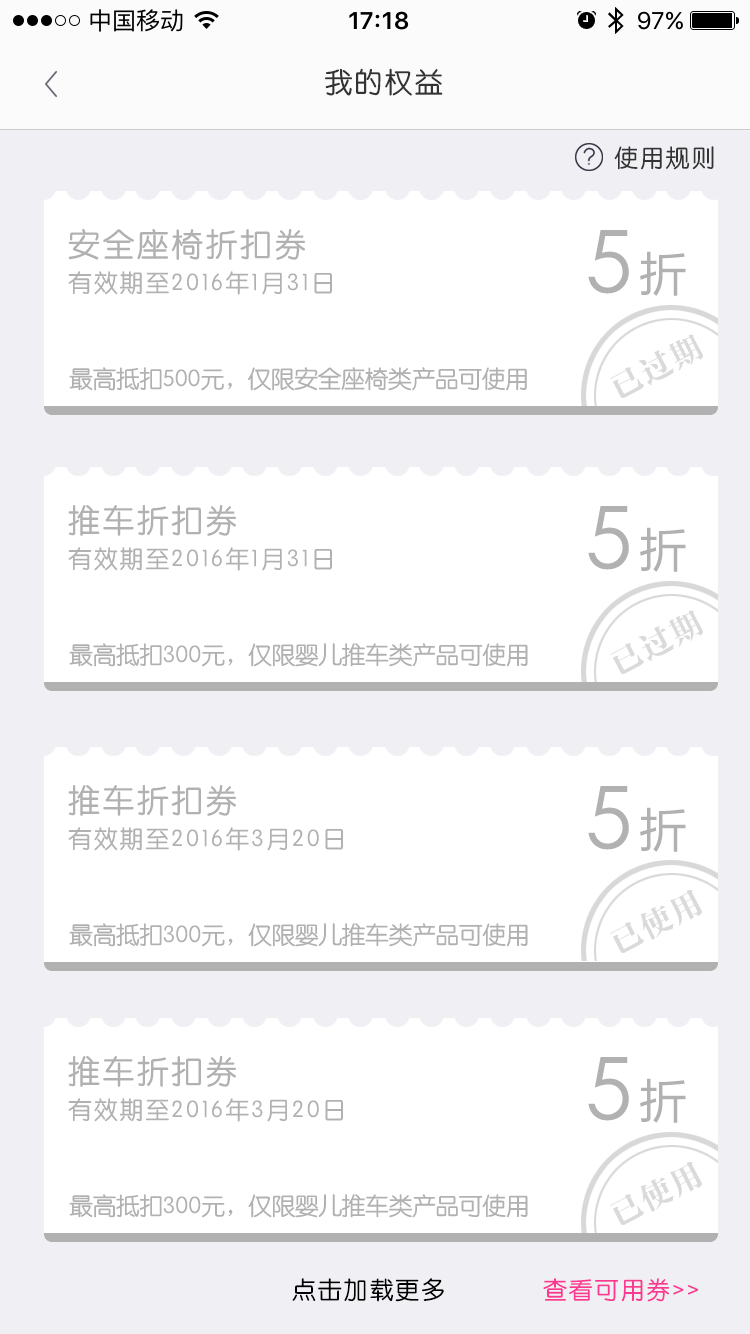
<style>
.page{position:relative;width:750px;height:1334px;background:#ffffff}
.page>*{position:absolute;margin:0}
.t1{font:28px "STYuanti-SC-Regular";letter-spacing:0.075em;color:#333333}
.t2{font:24px "STYuanti-SC-Regular";letter-spacing:0.075em;color:#333333}
.t3{font:32px "STYuanti-SC-Regular";letter-spacing:0.075em;color:#b1b1b1}
.t4{font:86px "STHeiti";letter-spacing:0.075em;color:#b1b1b1}
.t5{font:48px "FZLTHK_ZJRB--GBK1-0";letter-spacing:0.075em;color:#b1b1b1}
.t6{font:24px "STYuanti-SC-Regular";letter-spacing:0.075em;color:#b1b1b1}
.t7{font:31.5px "FZCYSK_ZJRB--GBK1-0";letter-spacing:0.075em;color:#dadada}
.t8{font:24px "STYuanti-SC-Regular";letter-spacing:-0.025em;color:#b1b1b1}
.t9{font:24px "STYuanti-SC-Regular";letter-spacing:0.075em;color:#000000}
.t10{font:24px "STYuanti-SC-Regular";letter-spacing:0.075em;color:#fc3991}
</style>
<div class="page">
<p class="t1" style="left:325px;top:68px;width:118px;height:28px">我的权益</p>
<p class="t2" style="left:614px;top:146px;width:100px;height:24px">使用规则</p>
<p class="t3" style="left:68px;top:229px;width:237px;height:31px">安全座椅折扣券</p>
<p class="t4" style="left:588px;top:230px;width:41px;height:64px">5</p>
<p class="t5" style="left:640px;top:251px;width:46px;height:45px">折</p>
<p class="t6" style="left:68px;top:271px;width:264px;height:24px">有效期至2016年1月31日</p>
<p class="t7" style="left:610px;top:334px;width:93px;height:64px;rotate:-28deg">已过期</p>
<p class="t8" style="left:69px;top:367px;width:458px;height:24px">最高抵扣500元，仅限安全座椅类产品可使用</p>
<p class="t3" style="left:68px;top:505px;width:168px;height:31px">推车折扣券</p>
<p class="t4" style="left:588px;top:506px;width:41px;height:64px">5</p>
<p class="t5" style="left:640px;top:527px;width:46px;height:45px">折</p>
<p class="t6" style="left:68px;top:547px;width:264px;height:24px">有效期至2016年1月31日</p>
<p class="t7" style="left:610px;top:610px;width:93px;height:64px;rotate:-28deg">已过期</p>
<p class="t8" style="left:69px;top:643px;width:459px;height:24px">最高抵扣300元，仅限婴儿推车类产品可使用</p>
<p class="t3" style="left:68px;top:785px;width:168px;height:31px">推车折扣券</p>
<p class="t4" style="left:588px;top:786px;width:41px;height:64px">5</p>
<p class="t5" style="left:640px;top:807px;width:46px;height:45px">折</p>
<p class="t6" style="left:68px;top:827px;width:275px;height:24px">有效期至2016年3月20日</p>
<p class="t7" style="left:610px;top:889px;width:92px;height:64px;rotate:-28deg">已使用</p>
<p class="t8" style="left:69px;top:923px;width:459px;height:24px">最高抵扣300元，仅限婴儿推车类产品可使用</p>
<p class="t3" style="left:68px;top:1056px;width:168px;height:31px">推车折扣券</p>
<p class="t4" style="left:588px;top:1057px;width:41px;height:64px">5</p>
<p class="t5" style="left:640px;top:1078px;width:46px;height:45px">折</p>
<p class="t6" style="left:68px;top:1098px;width:275px;height:24px">有效期至2016年3月20日</p>
<p class="t7" style="left:610px;top:1161px;width:92px;height:64px;rotate:-28deg">已使用</p>
<p class="t8" style="left:69px;top:1194px;width:459px;height:24px">最高抵扣300元，仅限婴儿推车类产品可使用</p>
<p class="t9" style="left:292px;top:1278px;width:152px;height:24px">点击加载更多</p>
<p class="t10" style="left:543px;top:1278px;width:156px;height:24px">查看可用券&gt;&gt;</p>
</div>
